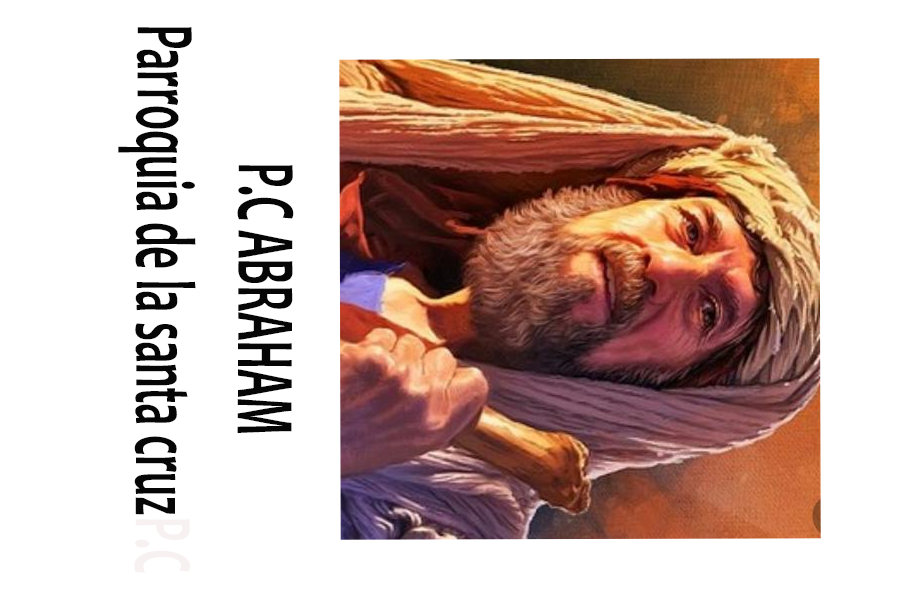
<style>
.page{position:relative;width:900px;height:600px;background:#ffffff}
.page>*{position:absolute;margin:0}
.t1{font:84.7px "Candara-Bold";color:#060606;scale:0.53 1}
.t2{font:84.7px "Candara-Bold";color:#f8f1f1;scale:0.53 1}
</style>
<div class="page">
<p class="t1" style="left:118px;top:27px;width:176px;height:546px;text-align:center;rotate:90deg">P.C ABRAHAM<br>Parroquia de la santa cruz<span class="t2">P.C AB</span></p>
</div>
